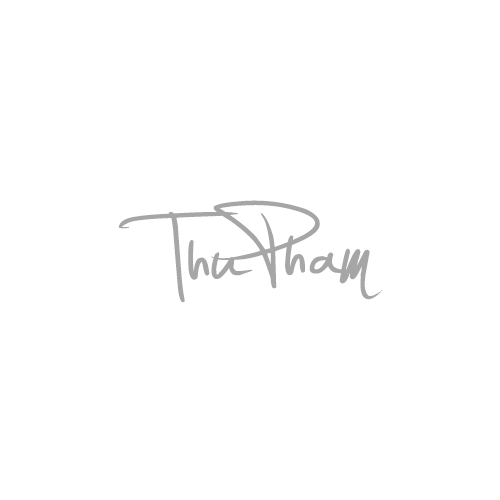
<style>
.page{position:relative;width:500px;height:500px;background:#ffffff}
.page>*{position:absolute;margin:0}
.t1{font:200px "Jellyka---Estrya's-Handwriting";color:#a6a6a6}
</style>
<div class="page">
<p class="t1" style="left:118px;top:200px;width:265px;height:103px;rotate:-2deg">ThuPham</p>
</div>
